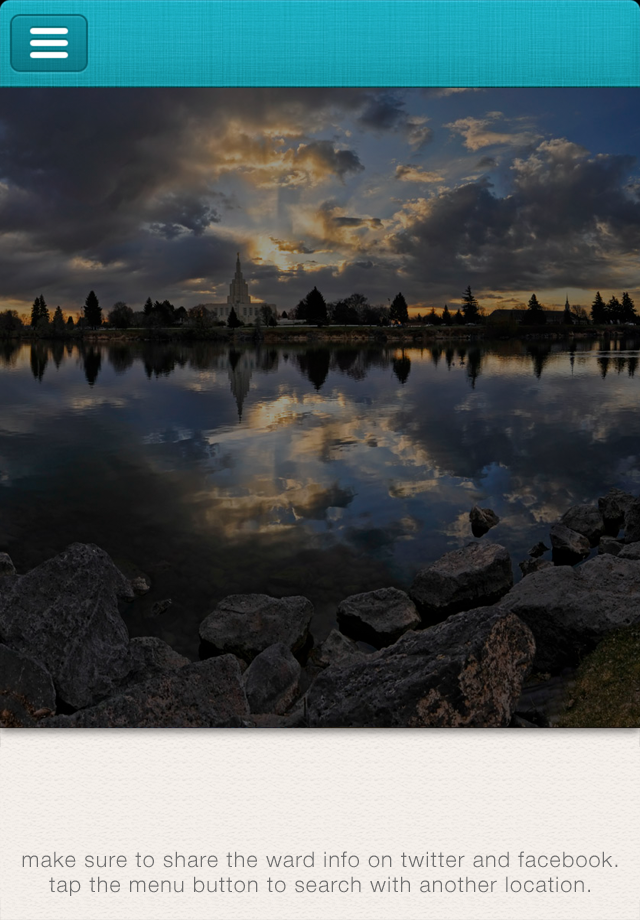
<style>
.page{position:relative;width:640px;height:920px}
.page>*{position:absolute;margin:0}
.t1{font:21.6px "HelveticaNeue-Light";letter-spacing:0.05em;color:#6e6e6e}
</style>
<div class="page">
<p class="t1" style="left:22px;top:851px;width:596px;height:45px;text-align:center">make sure to share the ward info on twitter and facebook.<br>tap the menu button to search with another location.</p>
</div>
